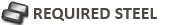
<style>
.page{position:relative;width:193px;height:25px;background:#ffffff}
.page>*{position:absolute;margin:0}
.t1{font:18px "Calibri-Bold";color:#4b4741}
</style>
<div class="page">
<p class="t1" style="left:34px;top:8px;width:123px;height:13px">REQUIRED STEEL</p>
</div>
